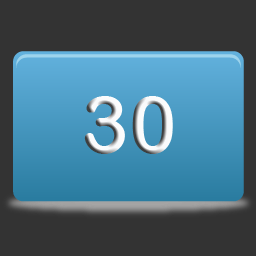
<style>
.page{position:relative;width:256px;height:256px;background:#333333}
.page>*{position:absolute;margin:0}
.t1{font:80px "ArialRoundedMTBold"}
</style>
<div class="page">
<p class="t1" style="left:84px;top:96px;width:89px;height:58px">30</p>
</div>
